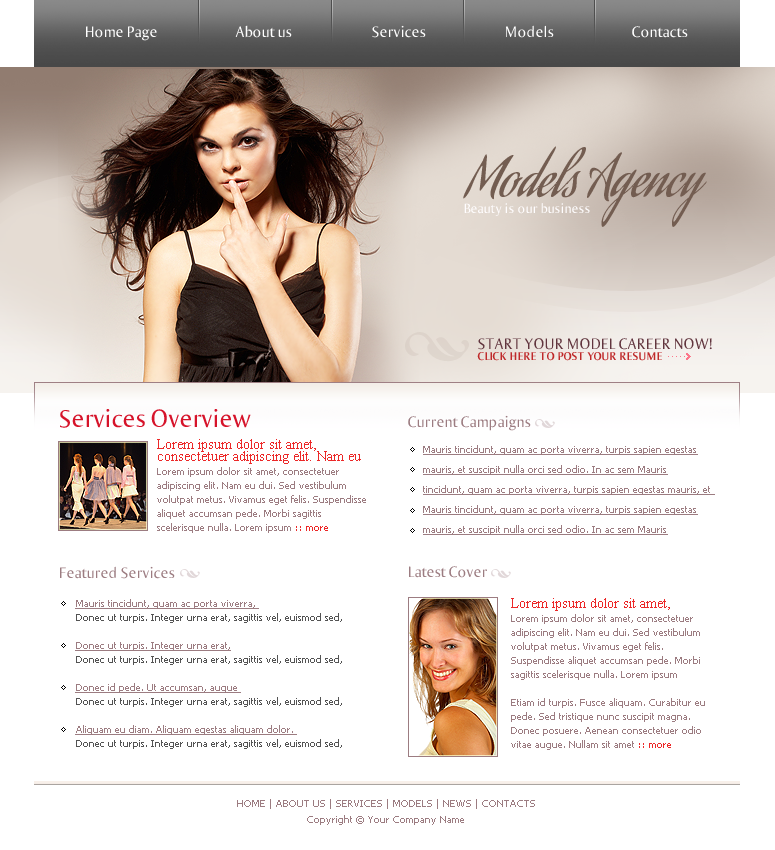
<style>
.page{position:relative;width:775px;height:850px;background:#ffffff}
.page>*{position:absolute;margin:0}
.t1{font:16px "Ogirema";color:#ffffff}
.t2{font:53.3px "AguafinaScript";color:#735d51}
.t3{font:14px "Ogirema";color:#fffdfe}
.t4{font:16px "Ogirema";color:#61353e}
.t5{font:12px "OgiremaBold";color:#bf292a}
.t6{font:26px "Ogirema";color:#d6132a}
.t7{font:16px "Ogirema";color:#9c7c81}
.t8{font:10px/14px "Tahoma";color:#9c7c81}
.t9{font:14px/12px "TimesNewRomanPSMT";color:#ec2828}
.t10{font:10px/14px "Tahoma";color:#ec2828}
.t11{font:10px/20px "Tahoma";color:#9c7c81;text-decoration:underline}
.t12{font:10px/14px "Tahoma";color:#535353}
.t13{font:10px/14px "Tahoma";color:#9c7c81;text-decoration:underline}
.t14{font:10px/16px "Tahoma";color:#9c7c81}
</style>
<div class="page">
<p class="t1" style="left:86px;top:26px;width:71px;height:15px">Home Page</p>
<p class="t1" style="left:235px;top:25px;width:57px;height:13px">About us</p>
<p class="t1" style="left:372px;top:25px;width:54px;height:13px">Services</p>
<p class="t1" style="left:506px;top:25px;width:48px;height:13px">Models</p>
<p class="t1" style="left:632px;top:26px;width:56px;height:12px">Contacts</p>
<p class="t2" style="left:463px;top:146px;width:244px;height:81px">Models Agency</p>
<p class="t3" style="left:464px;top:203px;width:126px;height:13px">Beauty is our business</p>
<p class="t4" style="left:478px;top:338px;width:234px;height:12px">START YOUR MODEL CAREER NOW!</p>
<p class="t5" style="left:477px;top:352px;width:185px;height:9px">CLICK HERE TO POST YOUR RESUME</p>
<p class="t6" style="left:60px;top:409px;width:191px;height:19px">Services Overview</p>
<p class="t7" style="left:408px;top:415px;width:123px;height:16px">Current Campaigns</p>
<p class="t8" style="left:157px;top:439px;width:209px;height:94px"><span class="t9">Lorem ipsum dolor sit amet, consectetuer adipiscing elit. Nam eu </span><br>Lorem ipsum dolor sit amet, consectetuer adipiscing elit. Nam eu dui. Sed vestibulum volutpat metus. Vivamus eget felis. Suspendisse aliquet accumsan pede. Morbi sagittis scelerisque nulla. Lorem ipsum <span class="t10">:: more</span></p>
<p class="t11" style="left:423px;top:445px;width:292px;height:90px">Mauris tincidunt, quam ac porta viverra, turpis sapien egestas mauris, et suscipit nulla orci sed odio. In ac sem Mauris tincidunt, quam ac porta viverra, turpis sapien egestas mauris, et <br>Mauris tincidunt, quam ac porta viverra, turpis sapien egestas mauris, et suscipit nulla orci sed odio. In ac sem Mauris</p>
<p class="t7" style="left:60px;top:566px;width:115px;height:13px">Featured Services</p>
<p class="t7" style="left:409px;top:566px;width:78px;height:12px">Latest Cover</p>
<p class="t12" style="left:75px;top:599px;width:267px;height:150px"><span class="t13">Mauris tincidunt, quam ac porta viverra, <br></span>Donec ut turpis. Integer urna erat, sagittis vel, euismod sed, <br><br><span class="t13">Donec ut turpis. Integer urna erat,<br></span>Donec ut turpis. Integer urna erat, sagittis vel, euismod sed, <br><br><span class="t13">Donec id pede. Ut accumsan, augue <br></span>Donec ut turpis. Integer urna erat, sagittis vel, euismod sed, <br><br><span class="t13">Aliquam eu diam. Aliquam egestas aliquam dolor. <br></span>Donec ut turpis. Integer urna erat, sagittis vel, euismod sed,</p>
<p class="t8" style="left:511px;top:598px;width:194px;height:152px"><span class="t9">Lorem ipsum dolor sit amet, </span><br>Lorem ipsum dolor sit amet, consectetuer adipiscing elit. Nam eu dui. Sed vestibulum volutpat metus. Vivamus eget felis. Suspendisse aliquet accumsan pede. Morbi sagittis scelerisque nulla. Lorem ipsum<br><br>Etiam id turpis. Fusce aliquam. Curabitur eu pede. Sed tristique nunc suscipit magna. Donec posuere. Aenean consectetuer odio vitae augue. Nullam sit amet <span class="t10">:: more</span></p>
<p class="t14" style="left:237px;top:799px;width:298px;height:26px;text-align:center">HOME | ABOUT US | SERVICES | MODELS | NEWS | CONTACTS<br>Copyright © Your Company Name</p>
</div>
